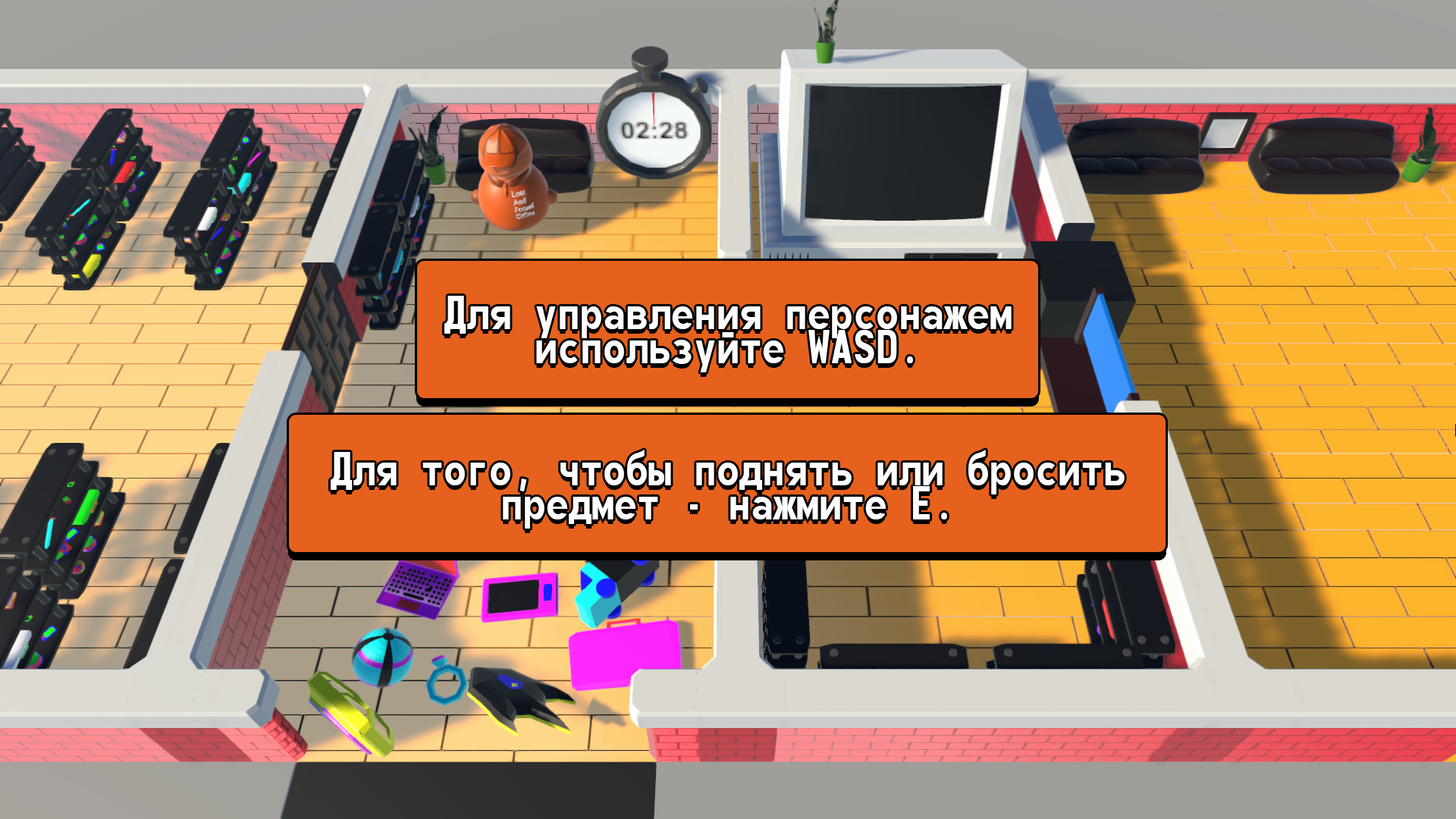
<style>
.page{position:relative;width:1456px;height:819px}
.page>*{position:absolute;margin:0}
.t1{font:56.9px/34.8px "Monofonto";color:#fdfefd}
</style>
<div class="page">
<p class="t1" style="left:444px;top:296px;width:568px;height:76px;text-align:center">Для управления персонажем<br>используйте WASD.</p>
<p class="t1" style="left:331px;top:450px;width:794px;height:79px;text-align:center">Для того, чтобы поднять или бросить<br>предмет - нажмите Е.</p>
</div>
